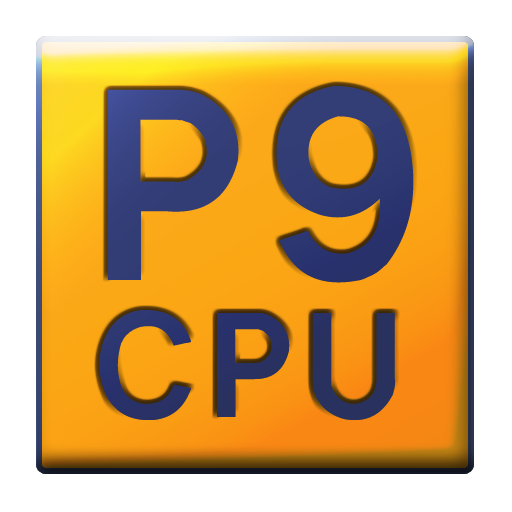
<style>
.page{position:relative;width:512px;height:512px;background:#ffffff}
.page>*{position:absolute;margin:0}
.t1{font:254px "Transport-Regular";color:#333d76}
.t2{font:140px "Transport-Medium";color:#333d76}
</style>
<div class="page">
<p class="t1" style="left:107px;top:85px;width:307px;height:198px">P9</p>
<p class="t2" style="left:99px;top:310px;width:297px;height:110px">CPU</p>
</div>
